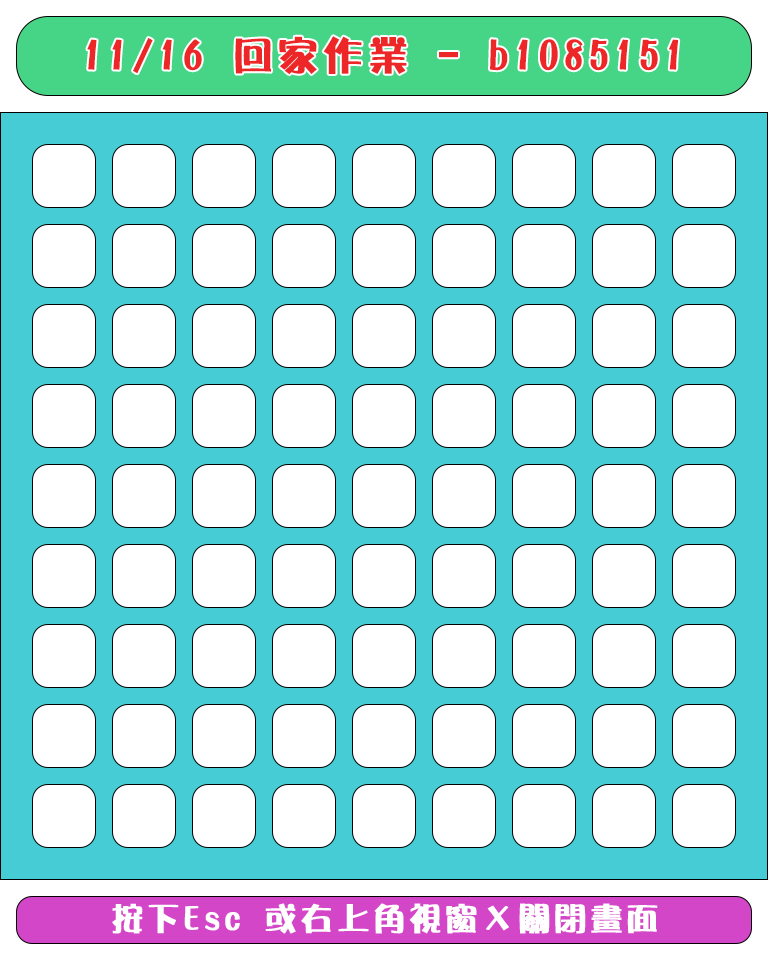
<style>
.page{position:relative;width:768px;height:960px;background:#ffffff}
.page>*{position:absolute;margin:0}
.t1{font:40px "DFPOP3-W12-WIN-BF";letter-spacing:0.1em;color:#ed2727;font-weight:bold}
.t2{font:32px "DFPOP3-W12-WIN-BF";letter-spacing:0.1em;color:#ffffff;font-weight:bold}
</style>
<div class="page">
<p class="t1" style="left:87px;top:36px;width:592px;height:39px">11/16 回家作業 - b1085151</p>
<p class="t2" style="left:112px;top:903px;width:546px;height:31px">按下Esc 或右上角視窗Ｘ關閉畫面</p>
</div>
